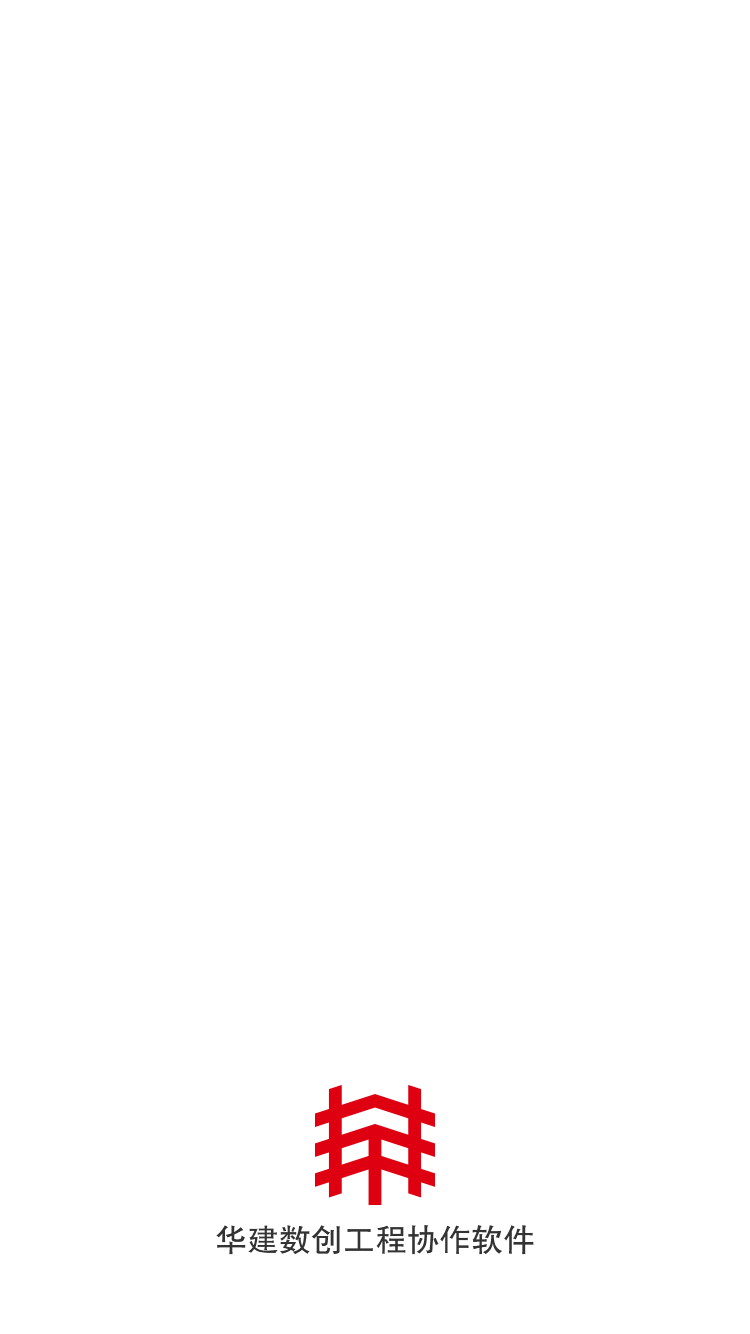
<style>
.page{position:relative;width:750px;height:1334px;background:#ffffff}
.page>*{position:absolute;margin:0}
.t1{font:32px "FZHTJW--GB1-0";color:#333333}
</style>
<div class="page">
<p class="t1" style="left:216px;top:1225px;width:318px;height:30px">华建数创工程协作软件</p>
</div>
